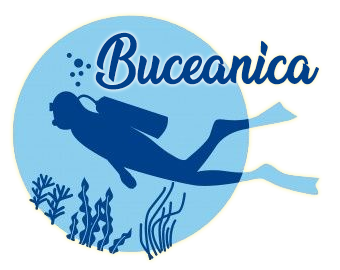
<style>
.page{position:relative;width:340px;height:270px;background:#ffffff}
.page>*{position:absolute;margin:0}
.t1{font:48px "NatureBeautyPersonalUse";color:#00408a}
</style>
<div class="page">
<p class="t1" style="left:95px;top:32px;width:224px;height:58px">Buceanica</p>
</div>
